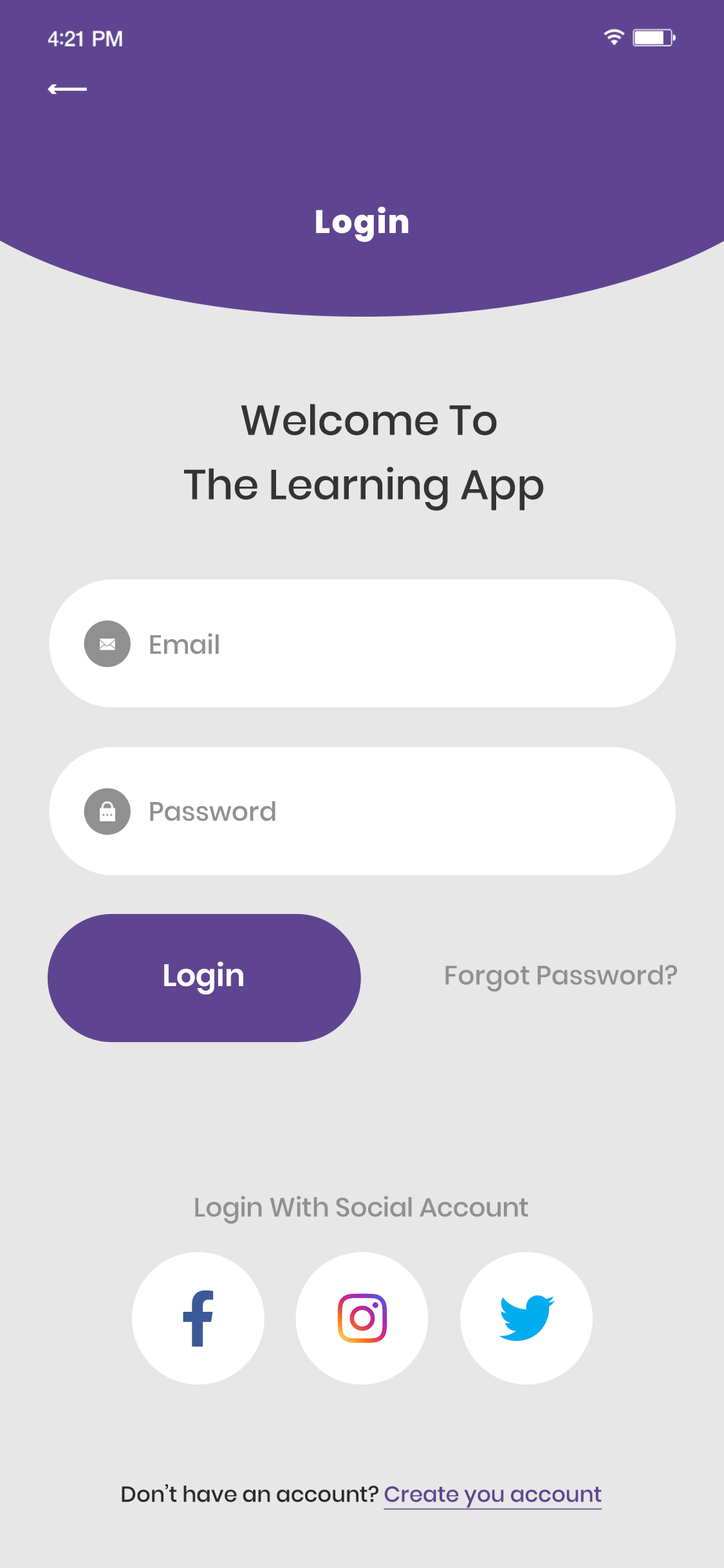
<style>
.page{position:relative;width:724px;height:1568px;background:#e7e7e7}
.page>*{position:absolute;margin:0}
.t1{font:21.9px "Poppins-Bold";letter-spacing:-0.245em;color:#ffffff}
.t2{font:32.2px "Poppins-ExtraBold";letter-spacing:0.04em;color:#ffffff}
.t3{font:41.8px/64.4px "Poppins-Medium";color:#343434}
.t4{font:26.4px "Poppins-Medium";letter-spacing:-0.005em;color:#909090}
.t5{font:30.9px "Poppins-SemiBold";letter-spacing:-0.005em;color:#ffffff}
.t6{font:21.9px "Poppins-Medium";letter-spacing:-0.005em;color:#2a2a2a}
.t7{font:21.9px "Poppins-Medium";letter-spacing:-0.005em;color:#5f4591;text-decoration:underline}
</style>
<div class="page">
<p class="t1" style="left:48px;top:84px;width:39px;height:10px">&lt;-----</p>
<p class="t2" style="left:316px;top:207px;width:93px;height:35px">Login</p>
<p class="t3" style="left:184px;top:404px;width:360px;height:107px;text-align:center">Welcome To<br>The Learning App</p>
<p class="t4" style="left:150px;top:633px;width:69px;height:21px">Email</p>
<p class="t4" style="left:150px;top:801px;width:125px;height:20px">Password</p>
<p class="t5" style="left:164px;top:962px;width:79px;height:32px">Login</p>
<p class="t4" style="left:445px;top:965px;width:232px;height:27px">Forgot Password?</p>
<p class="t4" style="left:195px;top:1196px;width:333px;height:28px">Login With Social Account</p>
<p class="t6" style="left:122px;top:1484px;width:480px;height:26px">Don’t have an account? <span class="t7">Create you account</span></p>
</div>
